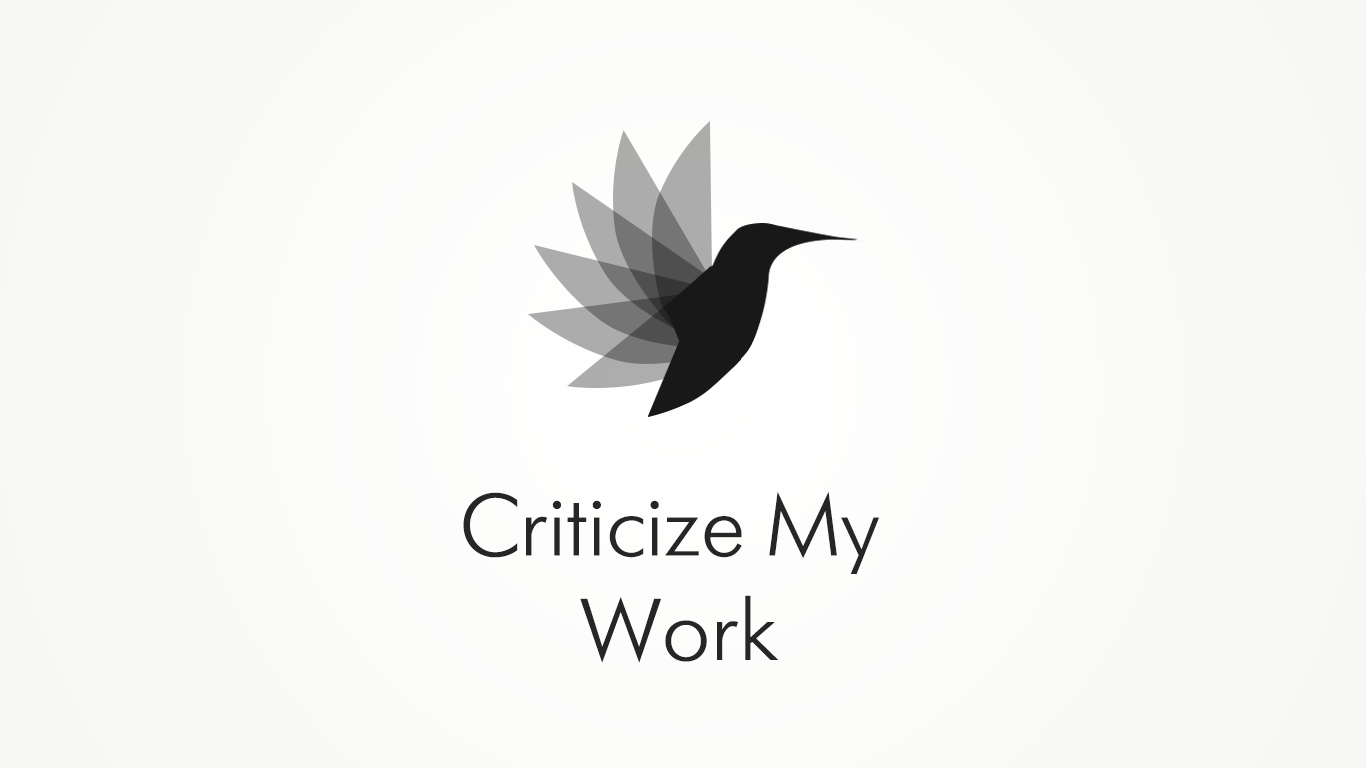
<style>
.page{position:relative;width:1366px;height:768px}
.page>*{position:absolute;margin:0}
.t1{font:87px "FuturaFuturisLightC";color:#262626}
</style>
<div class="page">
<p class="t1" style="left:463px;top:492px;width:416px;height:171px;text-align:center">Criticize My <br>Work</p>
</div>
